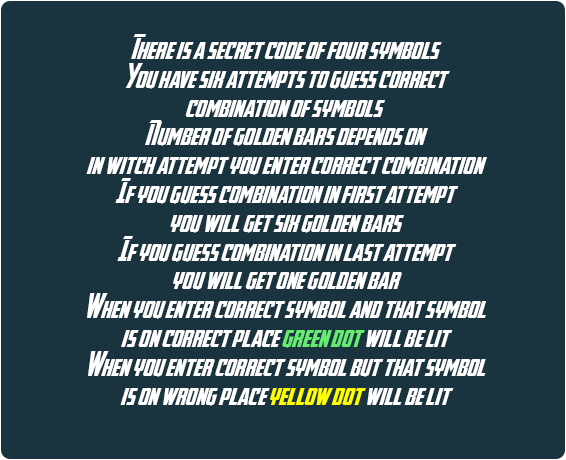
<style>
.page{position:relative;width:566px;height:460px;background:#1a343f}
.page>*{position:absolute;margin:0}
.t1{font:24px "Avengeance";color:#ffffff}
.t2{font:24px "Avengeance";color:#66ec73}
.t3{font:24px "Avengeance";color:#ffff00}
</style>
<div class="page">
<p class="t1" style="left:86px;top:34px;width:401px;height:372px;text-align:center">There is a secret code of four symbols<br>You have six attempts to guess correct<br>combination of symbols <br>Number of golden bars depends on<br>in witch attempt you enter correct combination<br>If you guess combination in first attempt<br>you will get six golden bars<br>If you guess combination in last attempt<br>you will get one golden bar<br>When you enter correct symbol and that symbol<br>is on correct place <span class="t2">green dot </span>will be lit<br>When you enter correct symbol but that symbol<br>is on wrong place <span class="t3">yellow dot </span>will be lit</p>
</div>
